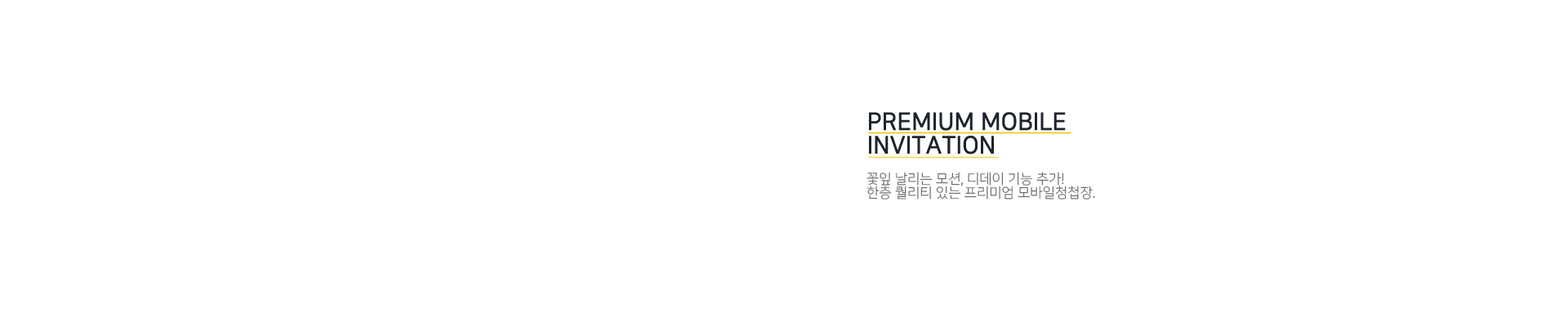
<style>
.page{position:relative;width:1568px;height:327px;background:#ffffff}
.page>*{position:absolute;margin:0}
.t1{font:23.5px "NanumSquareR";color:#1e232d;font-weight:bold}
.t2{font:13.7px "NanumSquareL";color:#636363}
</style>
<div class="page">
<p class="t1" style="left:869px;top:112px;width:197px;height:42px">PREMIUM MOBILE<br>INVITATION</p>
<p class="t2" style="left:866px;top:172px;width:229px;height:27px">꽃잎 날리는 모션, 디데이 기능 추가!<br>한층 퀄리티 있는 프리미엄 모바일청첩장.</p>
</div>
